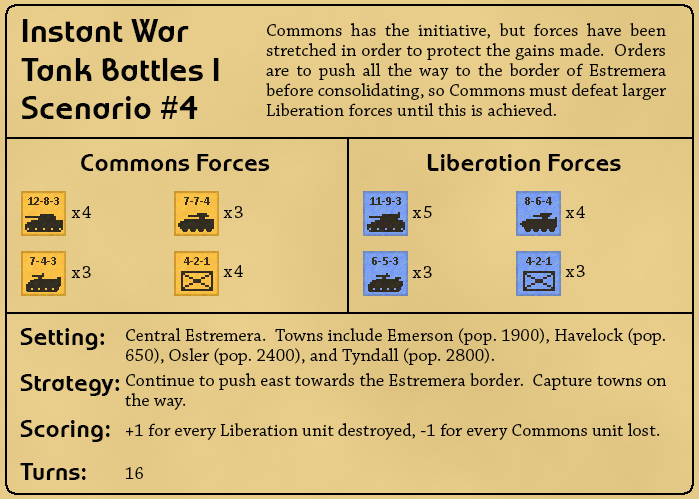
<style>
.page{position:relative;width:699px;height:499px}
.page>*{position:absolute;margin:0}
.t1{font:32px "WorldofWater-Regular";letter-spacing:0.01em;color:#030303}
.t2{font:18px/20px "ChaparralPro-Regular";letter-spacing:0.01em;color:#030303}
.t3{font:24px "WorldofWater-Regular";letter-spacing:0.01em;color:#030303}
.t4{font:18px "ChaparralPro-Regular";letter-spacing:0.1em;color:#030303}
.t5{font:18px "ChaparralPro-Regular";letter-spacing:0.01em;color:#030303}
</style>
<div class="page">
<p class="t1" style="left:21px;top:19px;width:198px;height:100px">Instant War<br>Tank Battles I<br>Scenario #4</p>
<p class="t2" style="left:266px;top:23px;width:401px;height:93px;text-align:justify">Commons has the initiative, but forces have been stretched in order to protect the gains made.  Orders are to push all the way to the border of Estremera before consolidating, so Commons must defeat larger Liberation forces until this is achieved.</p>
<p class="t3" style="left:81px;top:154px;width:189px;height:17px">Commons Forces</p>
<p class="t3" style="left:427px;top:154px;width:194px;height:17px">Liberation Forces</p>
<p class="t4" style="left:71px;top:206px;width:20px;height:12px">x4</p>
<p class="t4" style="left:223px;top:206px;width:20px;height:12px">x3</p>
<p class="t4" style="left:412px;top:206px;width:20px;height:12px">x5</p>
<p class="t4" style="left:565px;top:206px;width:20px;height:12px">x4</p>
<p class="t4" style="left:71px;top:266px;width:20px;height:12px">x3</p>
<p class="t4" style="left:223px;top:265px;width:20px;height:12px">x4</p>
<p class="t4" style="left:412px;top:266px;width:20px;height:12px">x3</p>
<p class="t4" style="left:565px;top:265px;width:20px;height:12px">x3</p>
<p class="t3" style="left:20px;top:328px;width:85px;height:22px">Setting:</p>
<p class="t2" style="left:126px;top:328px;width:539px;height:37px;text-align:justify">Central Estremera.  Towns include Emerson (pop. 1900), Havelock (pop. 650), Osler (pop. 2400), and Tyndall (pop. 2800).</p>
<p class="t3" style="left:20px;top:374px;width:100px;height:22px">Strategy:</p>
<p class="t2" style="left:125px;top:373px;width:542px;height:37px;text-align:justify">Continue to push east towards the Estremera border.  Capture towns on the way.</p>
<p class="t3" style="left:20px;top:420px;width:90px;height:22px">Scoring:</p>
<p class="t5" style="left:126px;top:423px;width:534px;height:17px">+1 for every Liberation unit destroyed, -1 for every Commons unit lost.</p>
<p class="t3" style="left:20px;top:463px;width:66px;height:17px">Turns:</p>
<p class="t5" style="left:125px;top:467px;width:18px;height:12px">16</p>
</div>
